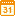
<style>
.page{position:relative;width:15px;height:16px;background:#f28e08}
.page>*{position:absolute;margin:0}
.t1{font:8px "ArialMT";color:#f28e08;font-weight:bold}
</style>
<div class="page">
<p class="t1" style="left:3px;top:7px;width:9px;height:6px">31</p>
</div>
